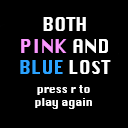
<style>
.page{position:relative;width:128px;height:128px;background:#000000}
.page>*{position:absolute;margin:0}
.t1{font:18px "Krungthep";color:#ffffff}
.t2{font:18px "Krungthep";color:#fb97ff}
.t3{font:18px "Krungthep";color:#2ba3ff}
.t4{font:10.4px "Krungthep";color:#ffffff}
</style>
<div class="page">
<p class="t1" style="left:20px;top:17px;width:91px;height:57px;text-align:center">BOTH<span class="t2"> <br>PINK</span> AND<br><span class="t3">BLUE </span>LOST</p>
<p class="t4" style="left:35px;top:85px;width:57px;height:24px;text-align:center">press r to <br>play again</p>
</div>
